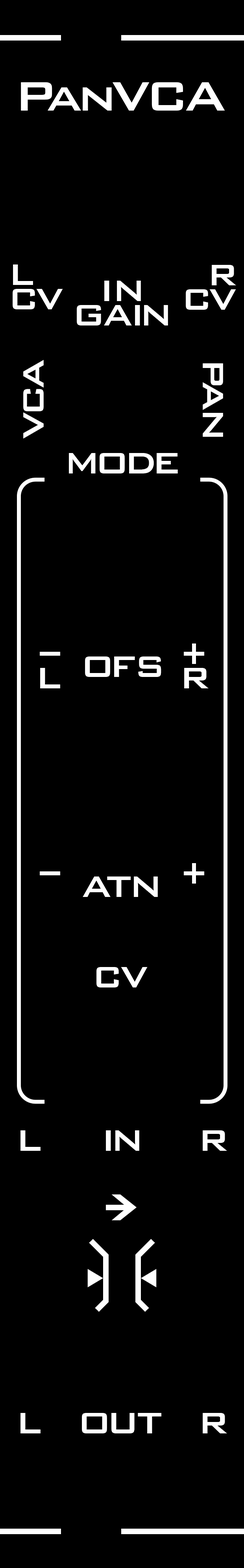
<style>
.page{position:relative;width:244px;height:1568px;background:#000000}
.page>*{position:absolute;margin:0}
.t1{font:55.1px "BankGothicBT-Medium";letter-spacing:-0.08em;color:#ffffff}
.t2{font:39.4px "BankGothicBT-Medium";letter-spacing:-0.14em;color:#ffffff}
.t3{font:39.4px "BankGothicBT-Medium";letter-spacing:-0.06em;color:#ffffff}
.t4{font:39.4px "BankGothicBT-Medium";letter-spacing:-0.08em;color:#ffffff}
.t5{font:39.4px "BankGothicBT-Medium";letter-spacing:-0.16em;color:#ffffff}
.t6{font:39.4px "BankGothicBT-Medium";letter-spacing:-0.1em;color:#ffffff}
.t7{font:39.4px "BankGothicBT-Medium";letter-spacing:-0.065em;color:#ffffff}
</style>
<div class="page">
<p class="t1" style="left:21px;top:82px;width:204px;height:29px">PanVCA</p>
<p class="t2" style="left:13px;top:264px;width:20px;height:21px">L</p>
<p class="t2" style="left:212px;top:265px;width:24px;height:20px">R</p>
<p class="t3" style="left:104px;top:281px;width:37px;height:20px">IN</p>
<p class="t4" style="left:13px;top:289px;width:50px;height:20px">CV</p>
<p class="t4" style="left:186px;top:289px;width:50px;height:21px">CV</p>
<p class="t3" style="left:77px;top:305px;width:91px;height:20px">G<span class="t4">A</span><span class="t5">I</span>N</p>
<p class="t6" style="left:23px;top:360px;width:21px;height:79px;rotate:-90deg">VCA</p>
<p class="t6" style="left:203px;top:363px;width:20px;height:74px;rotate:90deg">PAN</p>
<p class="t2" style="left:69px;top:453px;width:109px;height:20px">MODE</p>
<p class="t2" style="left:85px;top:656px;width:76px;height:21px">O<span class="t3">F</span>S</p>
<p class="t2" style="left:40px;top:668px;width:20px;height:20px">L</p>
<p class="t2" style="left:184px;top:668px;width:25px;height:20px">R</p>
<p class="t3" style="left:83px;top:876px;width:75px;height:21px">A<span class="t7">T</span>N</p>
<p class="t3" style="left:96px;top:967px;width:52px;height:20px">CV</p>
<p class="t2" style="left:20px;top:1130px;width:21px;height:21px">L</p>
<p class="t2" style="left:106px;top:1130px;width:33px;height:21px">IN</p>
<p class="t2" style="left:203px;top:1130px;width:24px;height:21px">R</p>
<p class="t2" style="left:20px;top:1413px;width:21px;height:20px">L</p>
<p class="t2" style="left:82px;top:1413px;width:79px;height:20px">O<span class="t3">U</span>T</p>
<p class="t2" style="left:203px;top:1413px;width:24px;height:20px">R</p>
</div>
